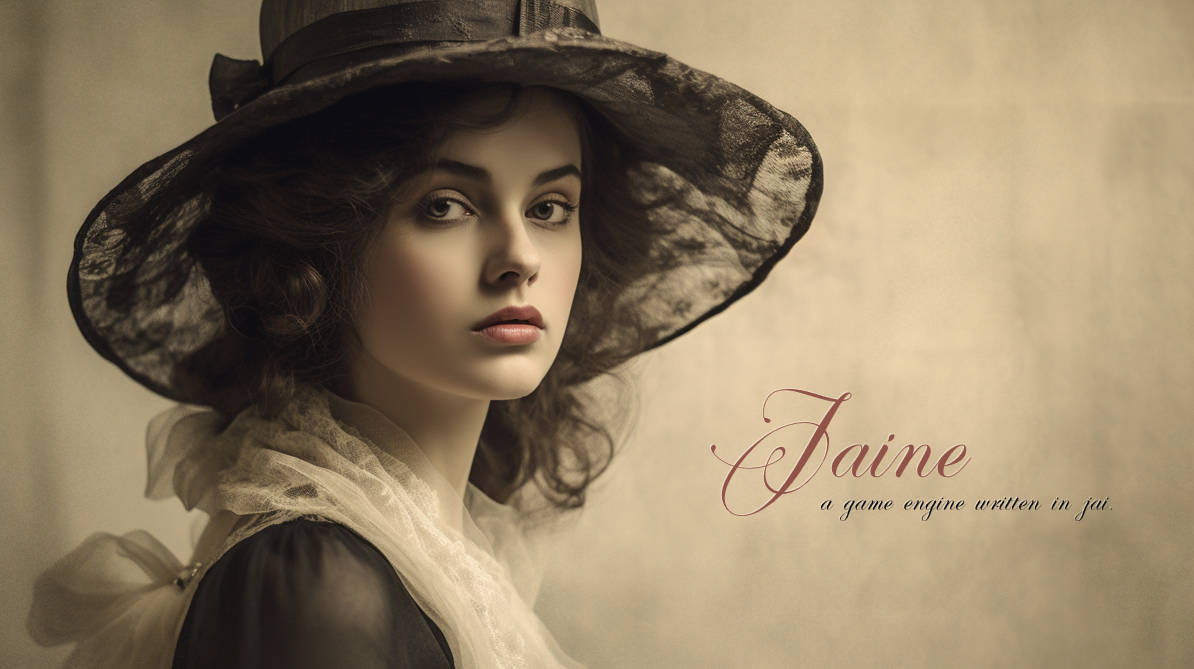
<style>
.page{position:relative;width:1194px;height:669px}
.page>*{position:absolute;margin:0}
.t1{font:118px "PerfectoCalligraphyPersonaluse";color:#915348}
.t2{font:34px "PerfectoCalligraphyPersonaluse";color:#0d0c12}
</style>
<div class="page">
<p class="t1" style="left:711px;top:388px;width:261px;height:128px">Jaine</p>
<p class="t2" style="left:820px;top:497px;width:293px;height:24px">a game engine written in jai.</p>
</div>
